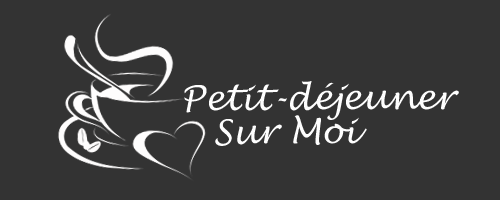
<style>
.page{position:relative;width:500px;height:200px;background:#333333}
.page>*{position:absolute;margin:0}
.t1{font:34px "LucidaHandwriting-Italic";color:#fefefe}
</style>
<div class="page">
<p class="t1" style="left:184px;top:81px;width:275px;height:39px">Petit-déjeuner</p>
<p class="t1" style="left:215px;top:115px;width:152px;height:31px">Sur Moi</p>
</div>
